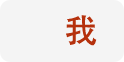
<style>
.page{position:relative;width:124px;height:62px;background:#f4f4f4}
.page>*{position:absolute;margin:0}
.t1{font:12px "STHeitiTC-Medium";color:#b5310d}
</style>
<div class="page">
<p class="t1" style="left:66px;top:15px;width:31px;height:31px">我</p>
</div>
